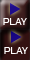
<style>
.page{position:relative;width:30px;height:60px}
.page>*{position:absolute;margin:0}
.t1{font:10.7px "SimianText-Orangutan";color:#ffffff}
</style>
<div class="page">
<p class="t1" style="left:3px;top:18px;width:24px;height:7px">PLAY</p>
<p class="t1" style="left:4px;top:47px;width:24px;height:7px">PLAY</p>
</div>
